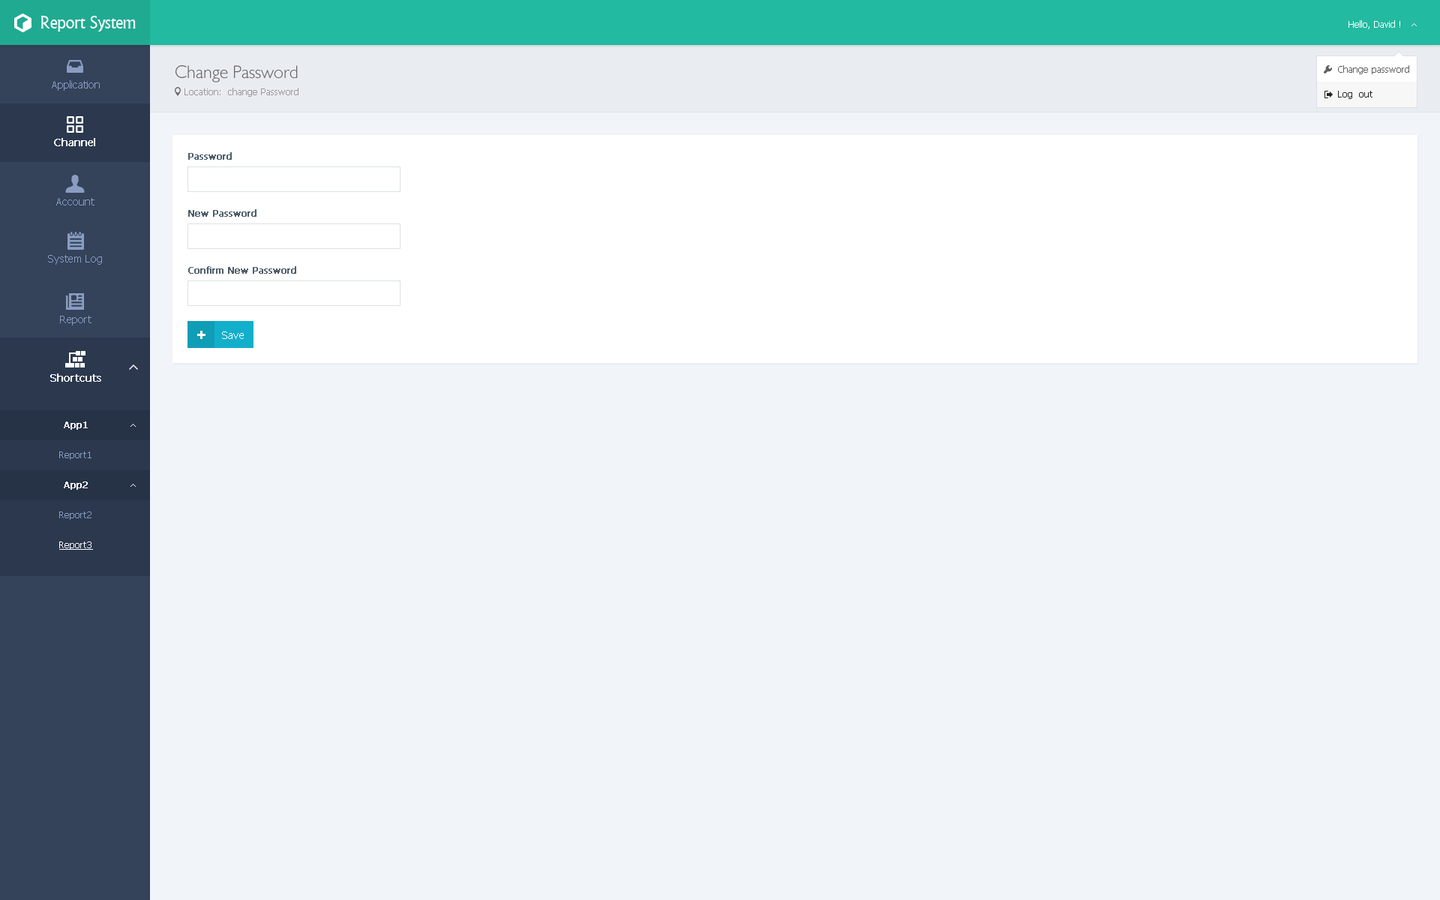
<style>
.page{position:relative;width:1440px;height:900px;background:#f1f4f9}
.page>*{position:absolute;margin:0}
.t1{font:18px "Narkisim";letter-spacing:-0.022em;color:#ffffff}
.t2{font:9px "Tahoma";color:#ffffff}
.t3{font:18px "084-CAI978";color:#666666}
.t4{font:9px "Tahoma";color:#5f5f5f}
.t5{font:10.5px "Tahoma";color:#899dc1}
.t6{font:9px "Tahoma";color:#999999}
.t7{font:9px "Tahoma";color:#262626}
.t8{font:10.5px "Tahoma";color:#ffffff;font-weight:bold}
.t9{font:9px "Tahoma";color:#4e5e6a;font-weight:bold}
.t10{font:10.5px "Tahoma";color:#ffffff}
.t11{font:9px "Tahoma";color:#ffffff;font-weight:bold}
.t12{font:9px "Tahoma";color:#899dc1}
.t13{font:9px "Tahoma";color:#ffffff;text-decoration:underline}
</style>
<div class="page">
<p class="t1" style="left:40px;top:16px;width:96px;height:16px">Report System</p>
<p class="t2" style="left:1348px;top:20px;width:52px;height:9px">Hello, David !</p>
<p class="t3" style="left:176px;top:65px;width:122px;height:17px">Change Password</p>
<p class="t4" style="left:1338px;top:65px;width:71px;height:9px">Change password</p>
<p class="t5" style="left:52px;top:80px;width:48px;height:11px">Application</p>
<p class="t6" style="left:184px;top:88px;width:114px;height:9px">Location:  change Password</p>
<p class="t7" style="left:1338px;top:91px;width:34px;height:8px">Log  out</p>
<p class="t8" style="left:54px;top:138px;width:41px;height:8px">Channel</p>
<p class="t9" style="left:188px;top:152px;width:44px;height:8px">Password</p>
<p class="t5" style="left:56px;top:198px;width:38px;height:8px">Account</p>
<p class="t9" style="left:188px;top:209px;width:68px;height:8px">New Password</p>
<p class="t5" style="left:48px;top:255px;width:54px;height:10px">System Log</p>
<p class="t9" style="left:188px;top:266px;width:108px;height:8px">Confirm New Password</p>
<p class="t5" style="left:60px;top:316px;width:32px;height:10px">Report</p>
<p class="t10" style="left:222px;top:332px;width:22px;height:7px">Save</p>
<p class="t8" style="left:50px;top:374px;width:51px;height:8px">Shortcuts</p>
<p class="t11" style="left:64px;top:422px;width:24px;height:8px">App1</p>
<p class="t12" style="left:59px;top:452px;width:33px;height:8px">Report1</p>
<p class="t11" style="left:64px;top:482px;width:24px;height:8px">App2</p>
<p class="t12" style="left:59px;top:512px;width:33px;height:8px">Report2</p>
<p class="t13" style="left:59px;top:542px;width:34px;height:8px">Report3</p>
</div>
